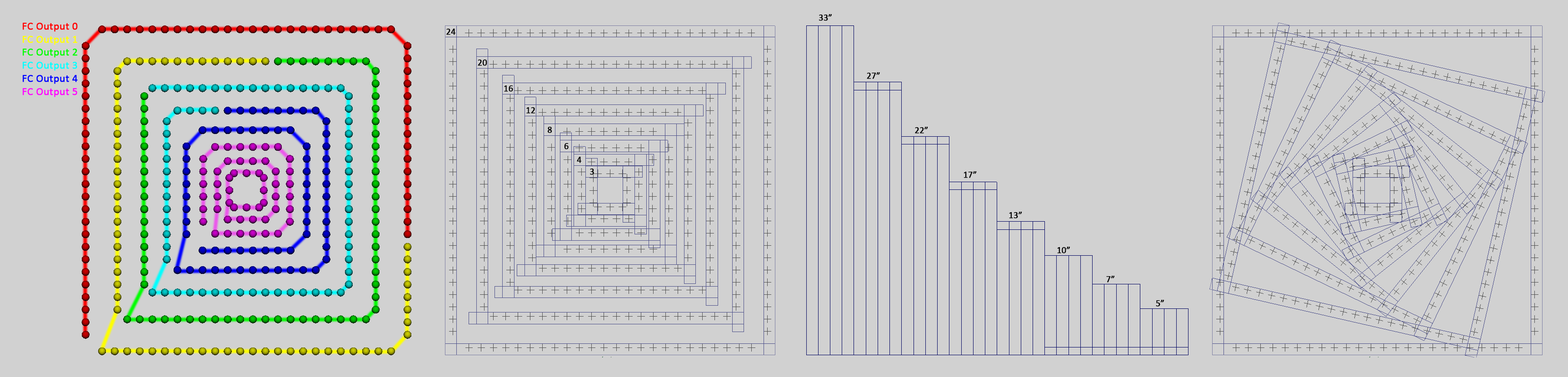
<style>
.page{position:relative;width:1568px;height:377px;background:#d1d1d1}
.page>*{position:absolute;margin:0}
.t1{font:9.1px "Calibri";color:#000000;font-weight:bold}
.t2{font:10.9px "Calibri";color:#ff0000;font-weight:bold}
.t3{font:10.9px "Calibri";color:#ffff00;font-weight:bold}
.t4{font:10.9px "Calibri";color:#00ff00;font-weight:bold}
.t5{font:10.9px "Calibri";color:#00ffff;font-weight:bold}
.t6{font:10.9px "Calibri";color:#0000ff;font-weight:bold}
.t7{font:10.9px "Calibri";color:#ff00ff;font-weight:bold}
</style>
<div class="page">
<p class="t1" style="left:819px;top:14px;width:13px;height:7px">33”</p>
<p class="t2" style="left:23px;top:23px;width:55px;height:74px">FC Output 0<br><span class="t3">FC Output 1<br></span><span class="t4">FC Output 2<br></span><span class="t5">FC Output 3<br></span><span class="t6">FC Output 4<br></span><span class="t7">FC Output 5</span></p>
<p class="t1" style="left:446px;top:29px;width:10px;height:6px">24</p>
<p class="t1" style="left:478px;top:60px;width:9px;height:6px">20</p>
<p class="t1" style="left:867px;top:72px;width:13px;height:7px">27”</p>
<p class="t1" style="left:504px;top:85px;width:9px;height:7px">16</p>
<p class="t1" style="left:526px;top:107px;width:9px;height:7px">12</p>
<p class="t1" style="left:548px;top:127px;width:4px;height:6px">8</p>
<p class="t1" style="left:915px;top:127px;width:13px;height:7px">22”</p>
<p class="t1" style="left:564px;top:143px;width:5px;height:7px">6</p>
<p class="t1" style="left:577px;top:157px;width:5px;height:6px">4</p>
<p class="t1" style="left:590px;top:169px;width:4px;height:6px">3</p>
<p class="t1" style="left:964px;top:171px;width:13px;height:7px">17”</p>
<p class="t1" style="left:1009px;top:212px;width:13px;height:7px">13”</p>
<p class="t1" style="left:1057px;top:247px;width:13px;height:7px">10”</p>
<p class="t1" style="left:1106px;top:276px;width:8px;height:7px">7”</p>
<p class="t1" style="left:1156px;top:300px;width:8px;height:7px">5”</p>
</div>
